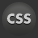
<style>
.page{position:relative;width:38px;height:38px;background:#333333}
.page>*{position:absolute;margin:0}
.t1{font:13px "FuturaLT-Bold";color:#cdcdcd}
</style>
<div class="page">
<p class="t1" style="left:7px;top:13px;width:24px;height:11px">CSS</p>
</div>
